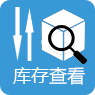
<style>
.page{position:relative;width:95px;height:95px;background:#3998d6}
.page>*{position:absolute;margin:0}
.t1{font:18px "MicrosoftYaHei";color:#ffffff}
</style>
<div class="page">
<p class="t1" style="left:13px;top:67px;width:72px;height:18px">库存查看</p>
</div>
